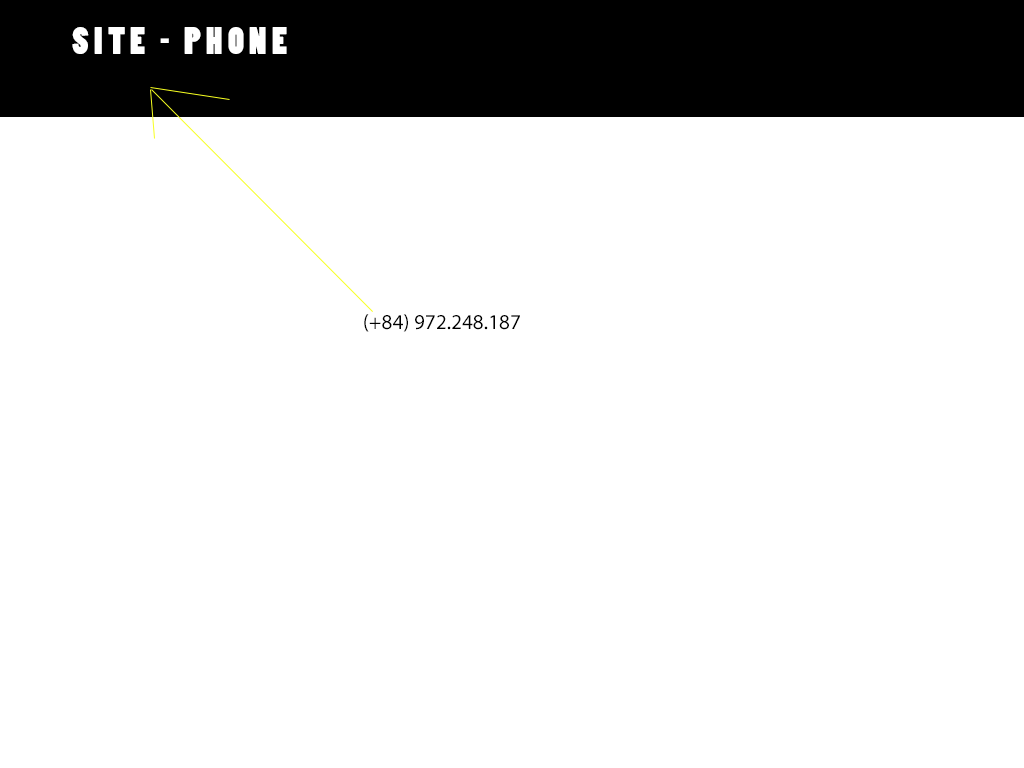
<style>
.page{position:relative;width:1024px;height:768px;background:#ffffff}
.page>*{position:absolute;margin:0}
.t1{font:36px "PoplarStd";letter-spacing:0.15em;color:#ffffff;text-transform:uppercase}
.t2{font:21.3px "MyriadPro-Regular";color:#000000}
</style>
<div class="page">
<p class="t1" style="left:72px;top:27px;width:215px;height:27px">Site - PHONE</p>
<p class="t2" style="left:364px;top:314px;width:156px;height:18px">(+84) 972.248.187</p>
</div>
